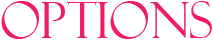
<style>
.page{position:relative;width:213px;height:40px;background:#ffffff}
.page>*{position:absolute;margin:0}
.t1{font:49.5px "FelixTitlingMT";color:#ef1e63}
</style>
<div class="page">
<p class="t1" style="left:1px;top:1px;width:211px;height:38px">OPTIONS</p>
</div>
